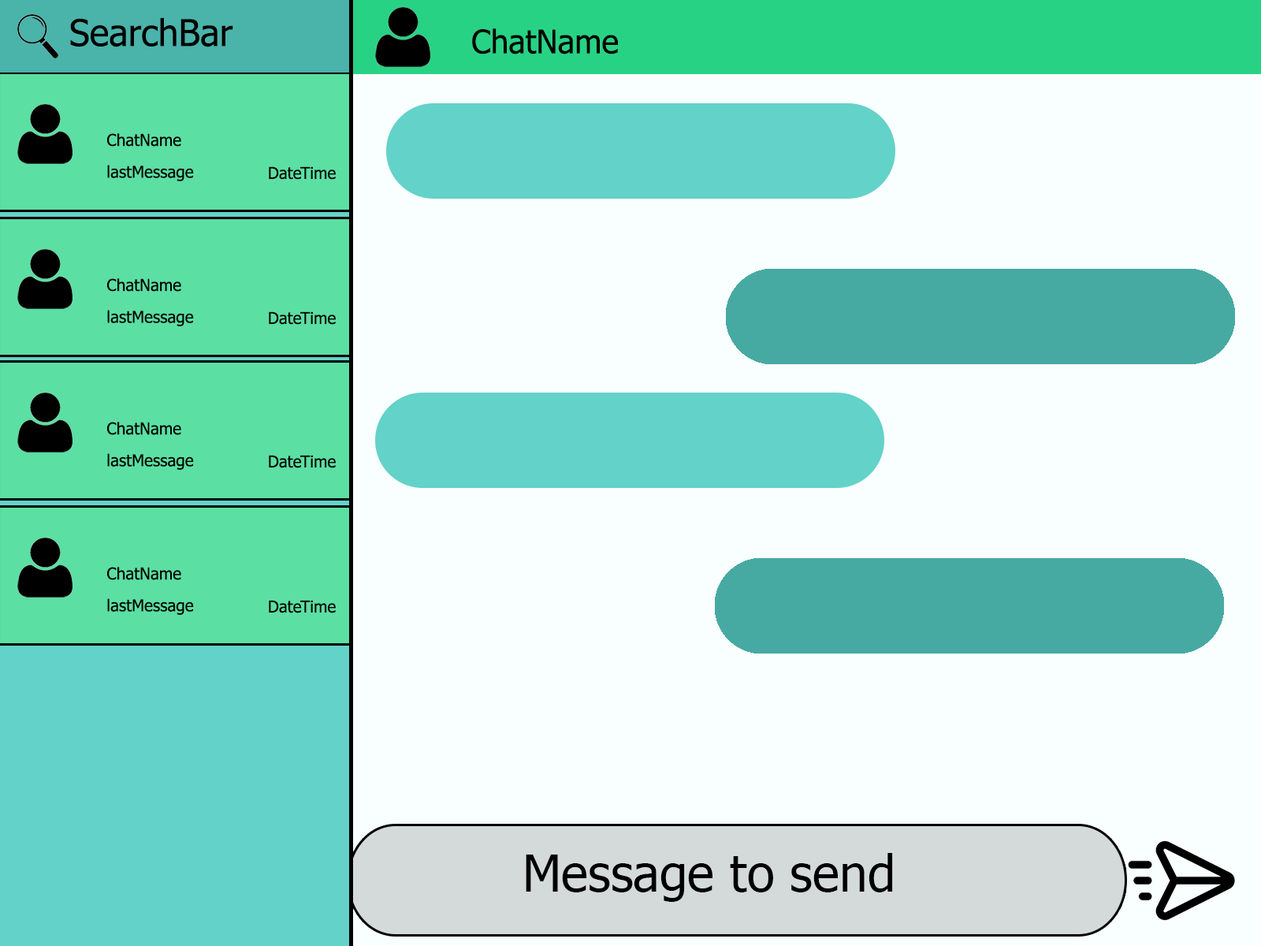
<style>
.page{position:relative;width:1261px;height:946px;background:#f9ffff}
.page>*{position:absolute;margin:0}
.t1{font:36.9px "Tahoma";color:#000000}
.t2{font:32.6px "Tahoma";color:#000000}
.t3{font:16.4px "Tahoma";color:#000000}
.t4{font:16.3px "Tahoma";color:#000000}
.t5{font:50.4px "Tahoma";color:#000000}
</style>
<div class="page">
<p class="t1" style="left:70px;top:17px;width:163px;height:30px">SearchBar</p>
<p class="t2" style="left:472px;top:28px;width:146px;height:26px">ChatName</p>
<p class="t3" style="left:107px;top:133px;width:74px;height:14px">ChatName</p>
<p class="t3" style="left:107px;top:165px;width:87px;height:16px">lastMessage</p>
<p class="t4" style="left:269px;top:166px;width:67px;height:14px">DateTime</p>
<p class="t3" style="left:107px;top:278px;width:74px;height:14px">ChatName</p>
<p class="t3" style="left:107px;top:310px;width:87px;height:16px">lastMessage</p>
<p class="t4" style="left:269px;top:311px;width:67px;height:14px">DateTime</p>
<p class="t3" style="left:107px;top:422px;width:74px;height:13px">ChatName</p>
<p class="t3" style="left:107px;top:453px;width:87px;height:17px">lastMessage</p>
<p class="t4" style="left:269px;top:455px;width:67px;height:13px">DateTime</p>
<p class="t3" style="left:107px;top:567px;width:74px;height:13px">ChatName</p>
<p class="t3" style="left:107px;top:598px;width:87px;height:17px">lastMessage</p>
<p class="t4" style="left:269px;top:600px;width:67px;height:13px">DateTime</p>
<p class="t5" style="left:526px;top:853px;width:367px;height:49px">Message to send</p>
</div>
